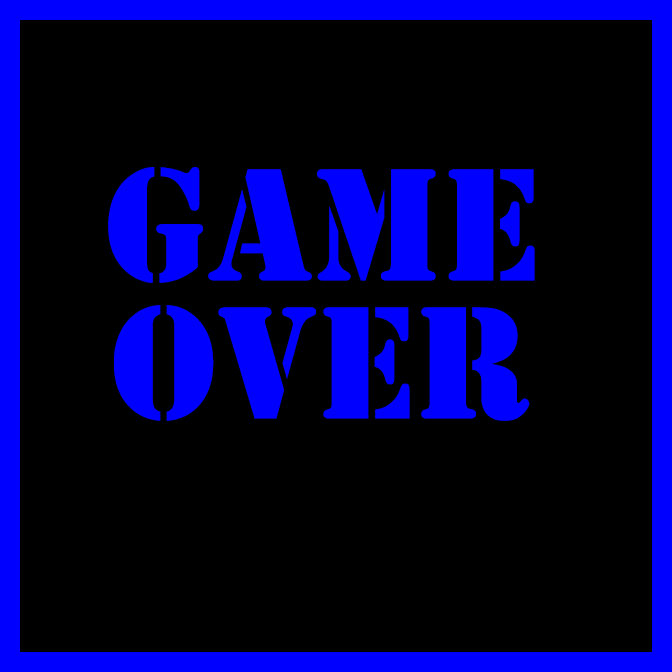
<style>
.page{position:relative;width:672px;height:672px;background:#000000}
.page>*{position:absolute;margin:0}
.t1{font:166.7px "Stencil";color:#0000ff}
</style>
<div class="page">
<p class="t1" style="left:108px;top:167px;width:427px;height:116px">Game</p>
<p class="t1" style="left:114px;top:305px;width:416px;height:116px">Over</p>
</div>
